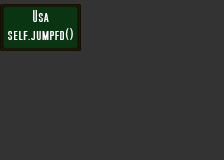
<style>
.page{position:relative;width:224px;height:160px;background:#333333}
.page>*{position:absolute;margin:0}
.t1{font:15px "SFMoviePoster";color:#fefefe}
.t2{font:1px "SFMoviePoster";color:#fefefe}
</style>
<div class="page">
<p class="t1" style="left:8px;top:10px;width:65px;height:30px;text-align:center"><span class="t2"><br></span>Usa <br>self.jumpfd()   l</p>
</div>
